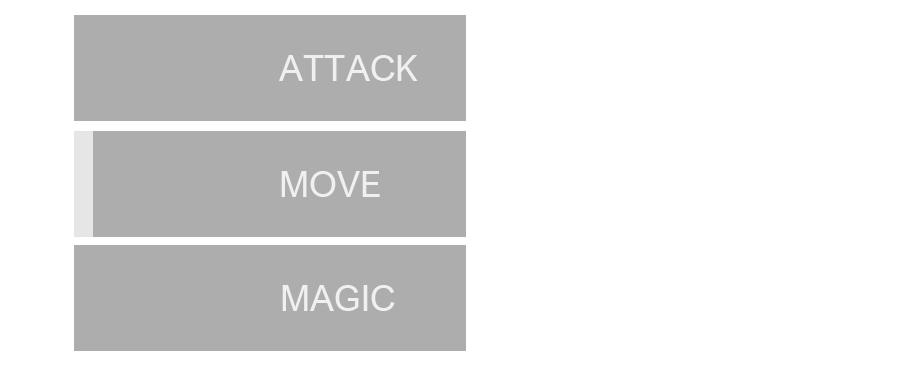
<style>
.page{position:relative;width:902px;height:388px;background:#ffffff}
.page>*{position:absolute;margin:0}
.t1{font:36px "ArialNova";color:#ffffff}
</style>
<div class="page">
<p class="t1" style="left:279px;top:55px;width:139px;height:26px;opacity:0.8">ATTACK</p>
<p class="t1" style="left:281px;top:171px;width:99px;height:26px;opacity:0.8">MOVE</p>
<p class="t1" style="left:282px;top:285px;width:113px;height:26px;opacity:0.8">MAGIC</p>
</div>
